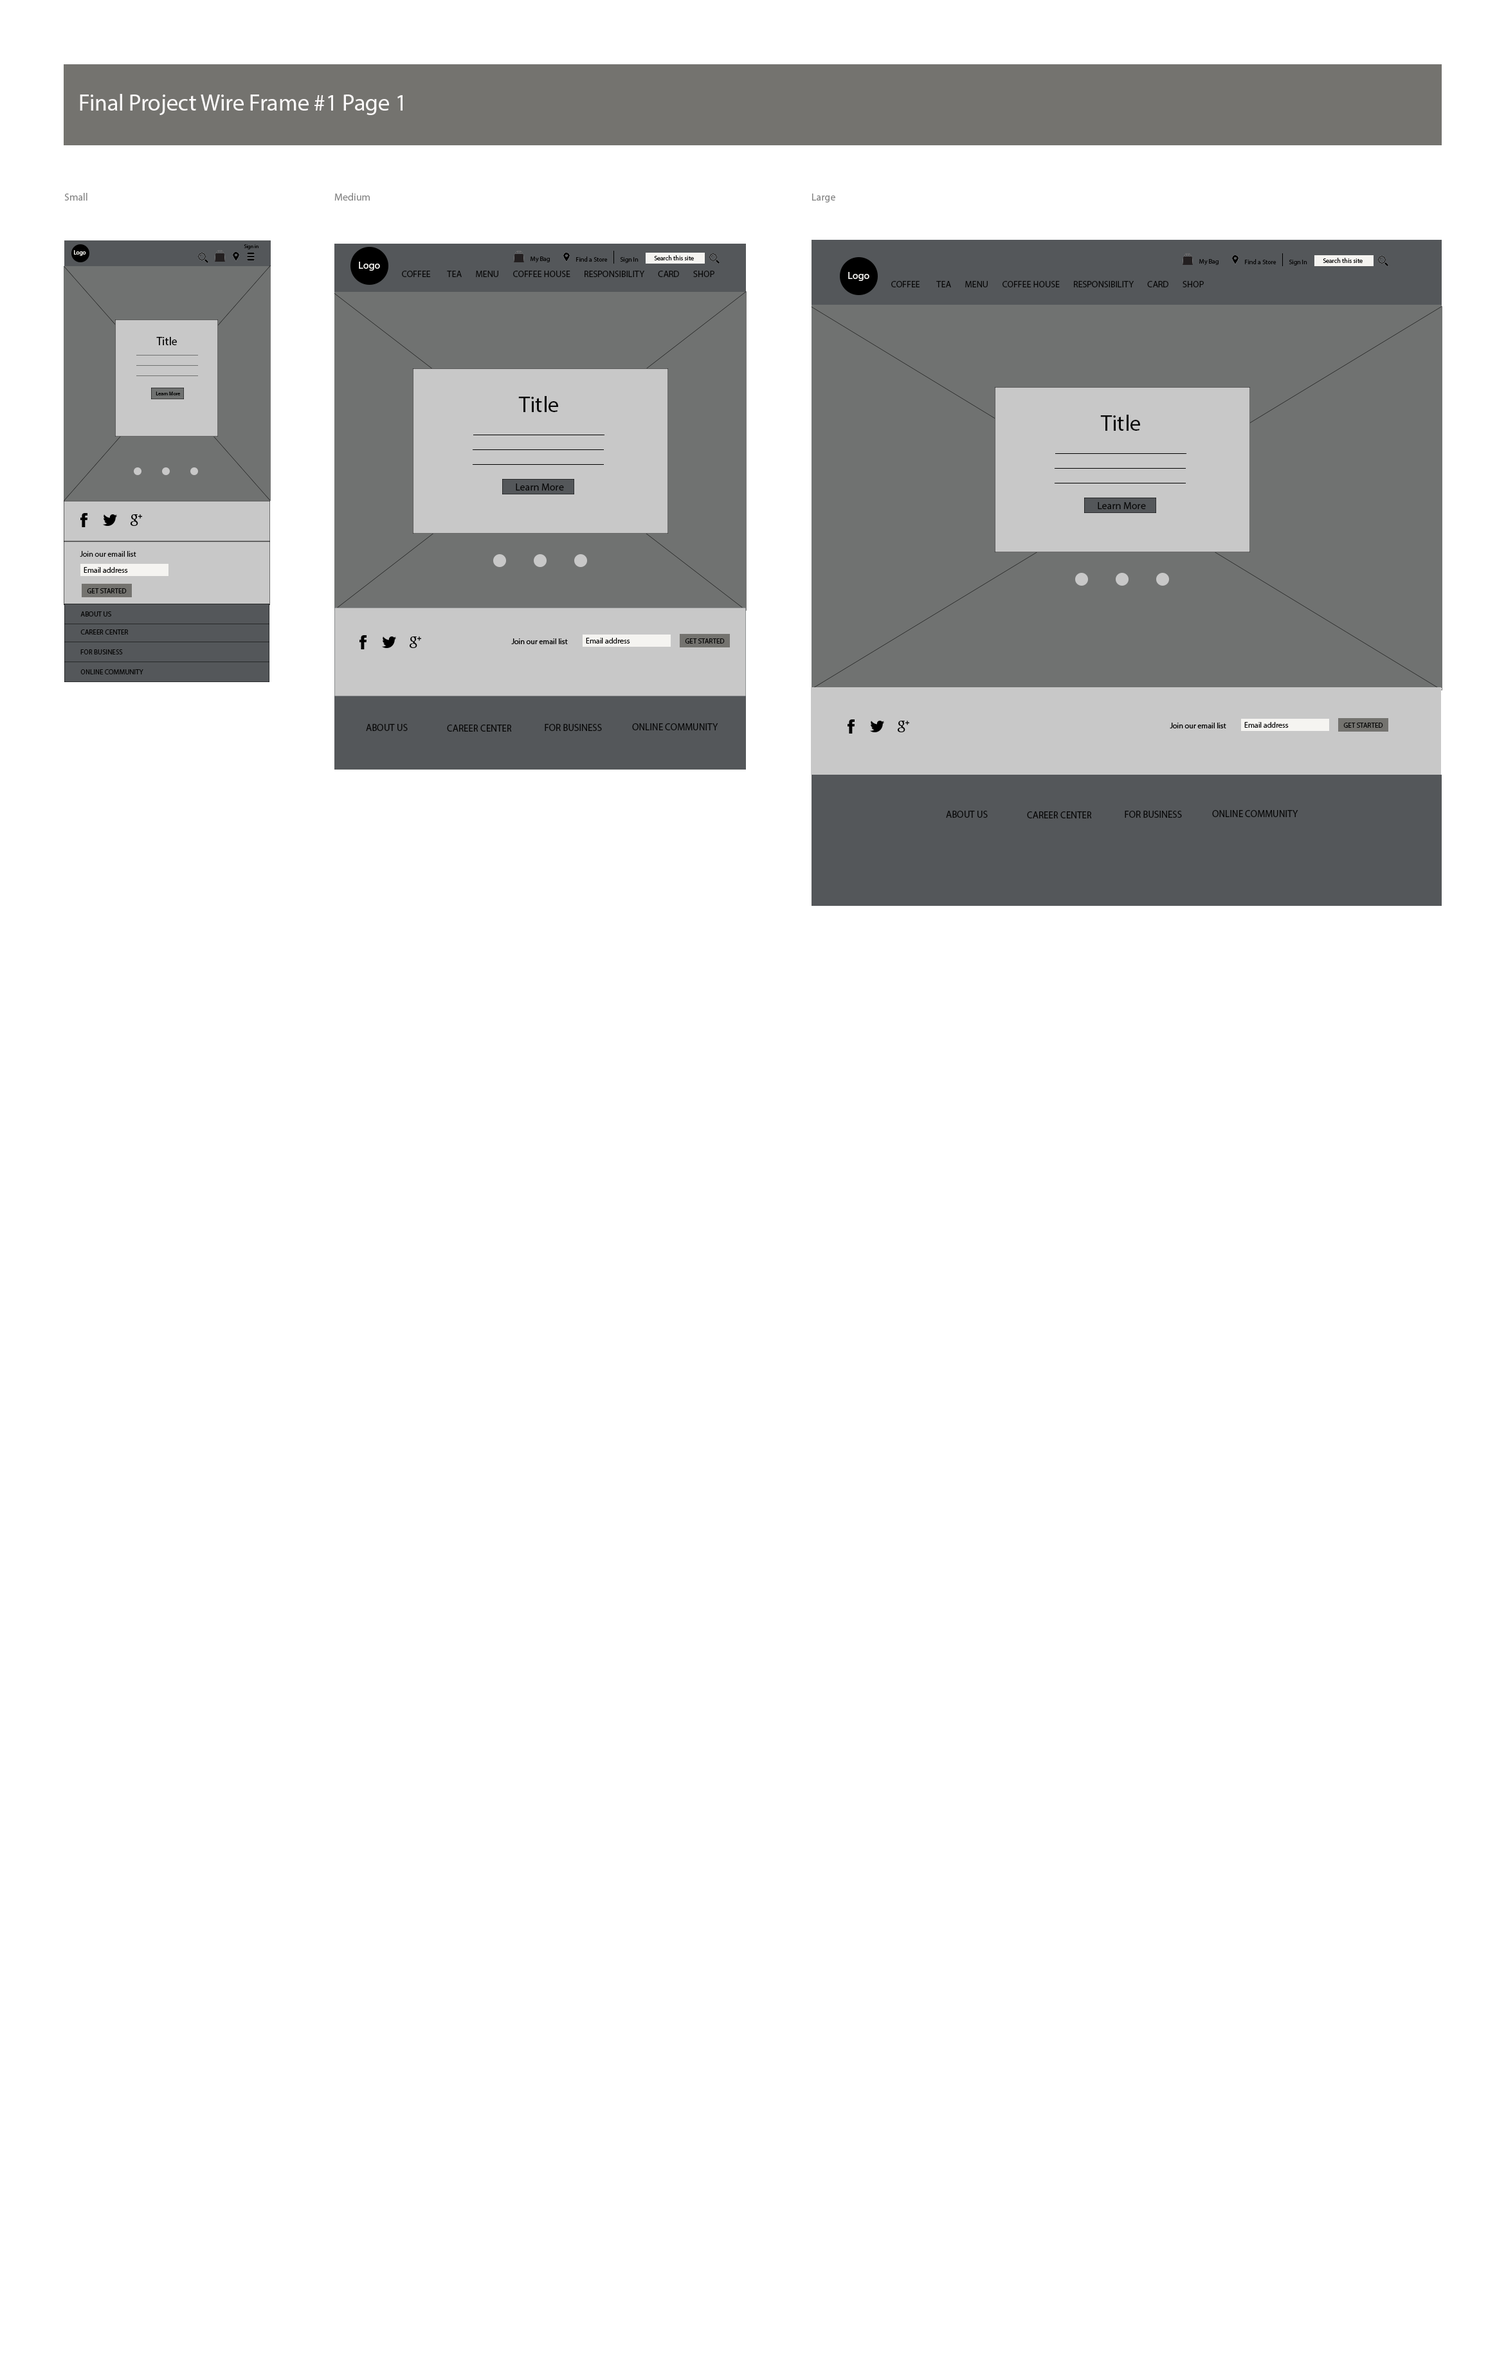
<style>
.page{position:relative;width:1506px;height:2353px;background:#ffffff}
.page>*{position:absolute;margin:0}
.t1{font:23.1px "MyriadPro-Regular";color:#fbf9f9}
.t2{font:10.3px "MyriadPro-Regular";color:#878787}
.t3{font:5.1px "MyriadPro-Regular";color:#080808}
.t4{font:5.8px "MyriadPro-Regular";color:#f8f7f3}
.t5{font:6.4px "MyriadPro-Regular";color:#080808}
.t6{font:10.3px "MyriadPro-Regular";color:#fbfaf7}
.t7{font:9px "MyriadPro-Regular";color:#080808}
.t8{font:11.6px "MyriadPro-Regular";color:#080808}
.t9{font:22.5px "MyriadPro-Regular";color:#080808}
.t10{font:10.3px "MyriadPro-Regular";color:#080808}
.t11{font:7.7px "MyriadPro-Regular";color:#080808}
.t12{font:7.1px "MyriadPro-Regular";color:#080808}
.t13{font:9.6px "MyriadPro-Regular";color:#080808}
</style>
<div class="page">
<p class="t1" style="left:80px;top:94px;width:322px;height:21px">Final Project Wire Frame #1 Page 1</p>
<p class="t2" style="left:64px;top:193px;width:23px;height:8px">Small</p>
<p class="t2" style="left:334px;top:193px;width:36px;height:8px">Medium</p>
<p class="t2" style="left:812px;top:194px;width:23px;height:9px">Large</p>
<p class="t3" style="left:244px;top:244px;width:14px;height:5px">Sign in</p>
<p class="t4" style="left:74px;top:250px;width:12px;height:6px">Logo</p>
<p class="t5" style="left:530px;top:256px;width:20px;height:7px">My Bag</p>
<p class="t5" style="left:576px;top:256px;width:32px;height:6px">Find a Store</p>
<p class="t5" style="left:620px;top:257px;width:18px;height:6px">Sign In</p>
<p class="t5" style="left:654px;top:255px;width:40px;height:5px">Search this site</p>
<p class="t5" style="left:1322px;top:258px;width:40px;height:5px">Search this site</p>
<p class="t6" style="left:359px;top:262px;width:21px;height:9px">Logo</p>
<p class="t5" style="left:1199px;top:259px;width:19px;height:7px">My Bag</p>
<p class="t5" style="left:1245px;top:259px;width:31px;height:5px">Find a Store</p>
<p class="t5" style="left:1288px;top:260px;width:19px;height:6px">Sign In</p>
<p class="t7" style="left:402px;top:271px;width:29px;height:6px">COFFEE</p>
<p class="t7" style="left:447px;top:271px;width:15px;height:6px">TEA</p>
<p class="t7" style="left:476px;top:271px;width:22px;height:6px">MENU</p>
<p class="t7" style="left:513px;top:271px;width:57px;height:6px">COFFEE HOUSE</p>
<p class="t7" style="left:584px;top:271px;width:60px;height:6px">RESPONSIBILITY</p>
<p class="t7" style="left:658px;top:271px;width:21px;height:6px">CARD</p>
<p class="t7" style="left:693px;top:271px;width:21px;height:6px">SHOP</p>
<p class="t6" style="left:848px;top:272px;width:21px;height:9px">Logo</p>
<p class="t7" style="left:891px;top:281px;width:29px;height:6px">COFFEE</p>
<p class="t7" style="left:936px;top:281px;width:15px;height:6px">TEA</p>
<p class="t7" style="left:965px;top:281px;width:22px;height:6px">MENU</p>
<p class="t7" style="left:1002px;top:281px;width:57px;height:6px">COFFEE HOUSE</p>
<p class="t7" style="left:1074px;top:281px;width:59px;height:6px">RESPONSIBILITY</p>
<p class="t7" style="left:1147px;top:281px;width:21px;height:6px">CARD</p>
<p class="t7" style="left:1182px;top:281px;width:21px;height:6px">SHOP</p>
<p class="t8" style="left:156px;top:337px;width:21px;height:8px">Title</p>
<p class="t3" style="left:156px;top:392px;width:25px;height:4px">Learn More</p>
<p class="t9" style="left:518px;top:396px;width:40px;height:16px">Title</p>
<p class="t9" style="left:1100px;top:415px;width:40px;height:16px">Title</p>
<p class="t10" style="left:516px;top:483px;width:48px;height:8px">Learn More</p>
<p class="t10" style="left:1097px;top:502px;width:49px;height:7px">Learn More</p>
<p class="t11" style="left:80px;top:551px;width:56px;height:6px">Join our email list</p>
<p class="t12" style="left:80px;top:611px;width:31px;height:5px">ABOUT US</p>
<p class="t12" style="left:80px;top:629px;width:49px;height:5px">CAREER CENTER</p>
<p class="t12" style="left:80px;top:649px;width:43px;height:5px">FOR BUSINESS</p>
<p class="t12" style="left:80px;top:669px;width:63px;height:5px">ONLINE COMMUNITY</p>
<p class="t13" style="left:366px;top:724px;width:42px;height:7px">ABOUT US</p>
<p class="t13" style="left:447px;top:724px;width:65px;height:8px">CAREER CENTER</p>
<p class="t13" style="left:544px;top:724px;width:58px;height:7px">FOR BUSINESS</p>
<p class="t13" style="left:632px;top:723px;width:86px;height:7px">ONLINE COMMUNITY</p>
<p class="t13" style="left:946px;top:811px;width:41px;height:7px">ABOUT US</p>
<p class="t13" style="left:1027px;top:811px;width:65px;height:7px">CAREER CENTER</p>
<p class="t13" style="left:1124px;top:811px;width:58px;height:7px">FOR BUSINESS</p>
<p class="t13" style="left:1212px;top:810px;width:86px;height:7px">ONLINE COMMUNITY</p>
</div>
